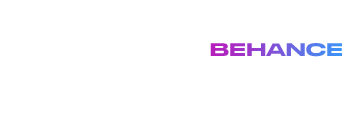
<style>
.page{position:relative;width:344px;height:122px;background:#ffffff}
.page>*{position:absolute;margin:0}
.t1{font:18.1px "StretchProRegular";text-transform:uppercase}
</style>
<div class="page">
<p class="t1" style="left:0px;top:43px;width:342px;height:14px">veja mais no behance</p>
</div>
